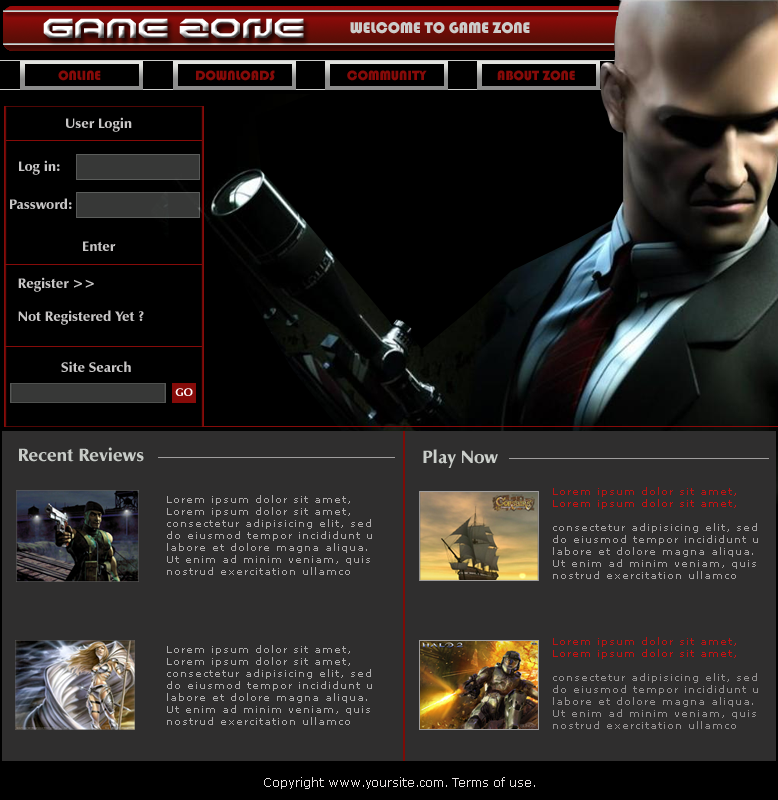
<style>
.page{position:relative;width:778px;height:800px;background:#2f2e2e}
.page>*{position:absolute;margin:0}
.t1{font:24px "BDDoomedSquareup"}
.t2{font:16px "Bauhaus93";color:#ccccca}
.t3{font:14px "Bauhaus93";color:#850a08}
.t4{font:14px "ZapfHumanist601BT-Ultra";color:#c6c4c4}
.t5{font:11px "ZapfHumanist601BT-Ultra";color:#fffefe}
.t6{font:18px "ZapfHumanist601BT-Ultra";color:#c7cbc7}
.t7{font:18px "ZapfHumanist601BT-Ultra";color:#caceca}
.t8{font:10px "Verdana";letter-spacing:0.1em;color:#aca9a9}
.t9{font:10px "Verdana";letter-spacing:0.1em;color:#c0bcbc}
.t10{font:10px "Verdana";letter-spacing:0.1em;color:#a5a2a2}
.t11{font:10px "Verdana";letter-spacing:0.1em;color:#ffffff}
.t12{font:10px "Verdana";letter-spacing:0.1em;color:#bb1414}
.t13{font:10px "Verdana";letter-spacing:0.1em;color:#bf1a1a}
.t14{font:10px "Verdana";letter-spacing:0.1em;color:#c71212}
.t15{font:10px "Verdana";letter-spacing:0.1em;color:#949191}
.t16{font:10px "Verdana";letter-spacing:0.1em;color:#b71e1e}
.t17{font:10px "Verdana";letter-spacing:0.1em;color:#abaaaa}
.t18{font:12px "Verdana";color:#e5e0e0}
</style>
<div class="page">
<p class="t1" style="left:43px;top:18px;width:261px;height:20px">GAME ZONE</p>
<p class="t2" style="left:350px;top:22px;width:180px;height:12px">WELCOME TO GAME ZONE</p>
<p class="t3" style="left:58px;top:70px;width:43px;height:11px">ONLINE</p>
<p class="t3" style="left:196px;top:70px;width:79px;height:11px">DOWNLOADS</p>
<p class="t3" style="left:347px;top:70px;width:80px;height:11px">COMMUNITY</p>
<p class="t3" style="left:497px;top:70px;width:78px;height:11px">ABOUT ZONE</p>
<p class="t4" style="left:66px;top:117px;width:66px;height:15px">User Login</p>
<p class="t4" style="left:19px;top:160px;width:41px;height:15px">Log in:</p>
<p class="t4" style="left:10px;top:198px;width:62px;height:11px">Password:</p>
<p class="t4" style="left:83px;top:241px;width:33px;height:10px">Enter</p>
<p class="t4" style="left:18px;top:277px;width:76px;height:15px">Register &gt;&gt;</p>
<p class="t4" style="left:18px;top:310px;width:126px;height:15px">Not Registered Yet ?</p>
<p class="t4" style="left:61px;top:361px;width:70px;height:11px">Site Search</p>
<p class="t5" style="left:175px;top:388px;width:18px;height:8px">GO</p>
<p class="t6" style="left:19px;top:447px;width:125px;height:15px">Recent Reviews</p>
<p class="t7" style="left:423px;top:449px;width:75px;height:19px">Play Now</p>
<p class="t8" style="left:167px;top:495px;width:205px;height:80px"><span class="t9"><br><br><br><br><br><br><br><br></span>Lorem ipsum dolor sit amet, <br>Lorem ipsum dolor sit amet, <br>consectetur adipisicing elit, sed <br>do eiusmod tempor incididunt u<br>labore et dolore magna aliqua. <br>Ut enim ad minim veniam, quis<br>nostrud exercitation ullamco</p>
<p class="t10" style="left:553px;top:487px;width:205px;height:92px"><span class="t11"><br><br><br><br><br><br><br><br></span><span class="t12">Lorem ipsum dolor sit amet</span><span class="t13">, <br></span><span class="t14">Lorem ipsum dolor sit amet, <br><br></span>consectetur adipisicing elit, sed <br>do eiusmod tempor incididunt u<br>labore et dolore magna aliqua. <br>Ut enim ad minim veniam, quis<br>nostrud exercitation ullamco</p>
<p class="t15" style="left:553px;top:637px;width:205px;height:92px"><span class="t11"><br><br><br><br><br><br><br><br></span><span class="t12">Lorem ipsum dolor sit amet</span><span class="t16">, <br></span><span class="t14">Lorem ipsum dolor sit amet, <br><br></span>consectetur adipisicing elit, sed <br>do eiusmod tempor incididunt u<br>labore et dolore magna aliqua. <br>Ut enim ad minim veniam, quis<br>nostrud exercitation ullamco</p>
<p class="t17" style="left:167px;top:645px;width:205px;height:80px">Lorem ipsum dolor sit amet, <br>Lorem ipsum dolor sit amet, <br>consectetur adipisicing elit, sed <br>do eiusmod tempor incididunt u<br>labore et dolore magna aliqua. <br>Ut enim ad minim veniam, quis<br>nostrud exercitation ullamco</p>
<p class="t18" style="left:264px;top:777px;width:271px;height:12px">Copyright www.yoursite.com. Terms of use.</p>
</div>
